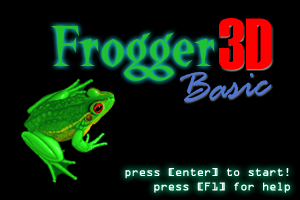
<style>
.page{position:relative;width:300px;height:200px;background:#000000}
.page>*{position:absolute;margin:0}
.t1{font:60px "LaBambaLetPlain";color:#21c130}
.t2{font:72px "Haettenschweiler";color:#ff0000}
.t3{font:48px "RageItalicLetPlain";color:#5076d0}
.t4{font:12px "OCRAExtended";color:#ffffff}
</style>
<div class="page">
<p class="t1" style="left:51px;top:26px;width:164px;height:55px">Frogger</p>
<p class="t2" style="left:219px;top:18px;width:53px;height:52px">3D</p>
<p class="t3" style="left:179px;top:71px;width:93px;height:31px;rotate:-6deg">Basic</p>
<p class="t4" style="left:125px;top:168px;width:165px;height:25px;text-align:right">press [enter] to start!<br>press [F1] for help</p>
</div>
